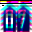
<style>
.page{position:relative;width:32px;height:32px}
.page>*{position:absolute;margin:0}
.t1{font:19px "AgencyFB-Bold"}
</style>
<div class="page">
<p class="t1" style="left:5px;top:8px;width:21px;height:16px">0 7</p>
</div>
